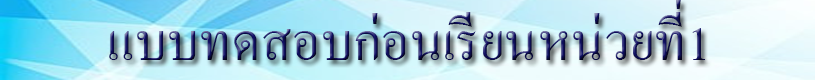
<style>
.page{position:relative;width:815px;height:80px}
.page>*{position:absolute;margin:0}
.t1{font:72px "AngsanaNew"}
</style>
<div class="page">
<p class="t1" style="left:109px;top:0px;width:596px;height:60px">แบบทดสอบก่อนเรียนหน่วยที่1</p>
</div>
